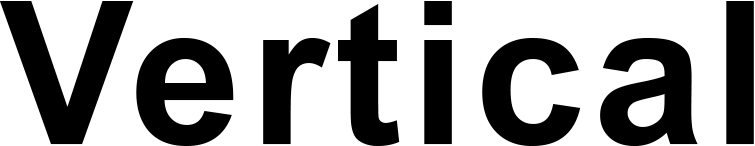
<style>
.page{position:relative;width:755px;height:146px;background:#ffffff}
.page>*{position:absolute;margin:0}
.t1{font:200px "Arial-BoldMT";letter-spacing:0.04em;color:#000000}
</style>
<div class="page">
<p class="t1" style="left:0px;top:1px;width:754px;height:145px">Vertical</p>
</div>
